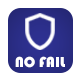
<style>
.page{position:relative;width:80px;height:80px;background:#ffffff}
.page>*{position:absolute;margin:0}
.t1{font:15px "Bauhaus93";color:#ffffff}
</style>
<div class="page">
<p class="t1" style="left:15px;top:56px;width:50px;height:12px">NO FAIL</p>
</div>
